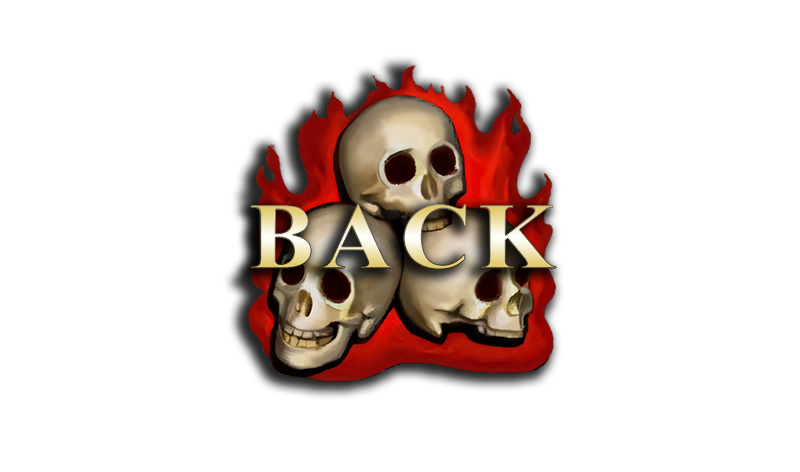
<style>
.page{position:relative;width:800px;height:472px;background:#ffffff}
.page>*{position:absolute;margin:0}
.t1{font:94px "TimesNewRomanPS-BoldMT";letter-spacing:0.07em;scale:1.05 1}
</style>
<div class="page">
<p class="t1" style="left:251px;top:204px;width:305px;height:66px">BACK</p>
</div>
